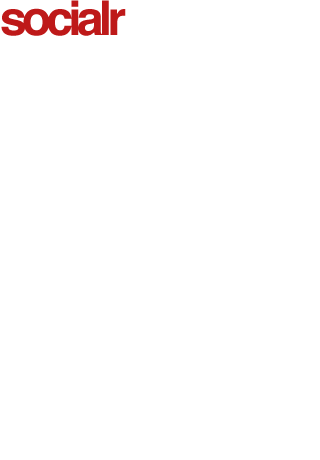
<style>
.page{position:relative;width:320px;height:460px;background:#ffffff}
.page>*{position:absolute;margin:0}
.t1{font:48px "Helvetica-Bold";letter-spacing:-0.1em;color:#be1919}
</style>
<div class="page">
<p class="t1" style="left:1px;top:0px;width:125px;height:36px">socialr</p>
</div>
